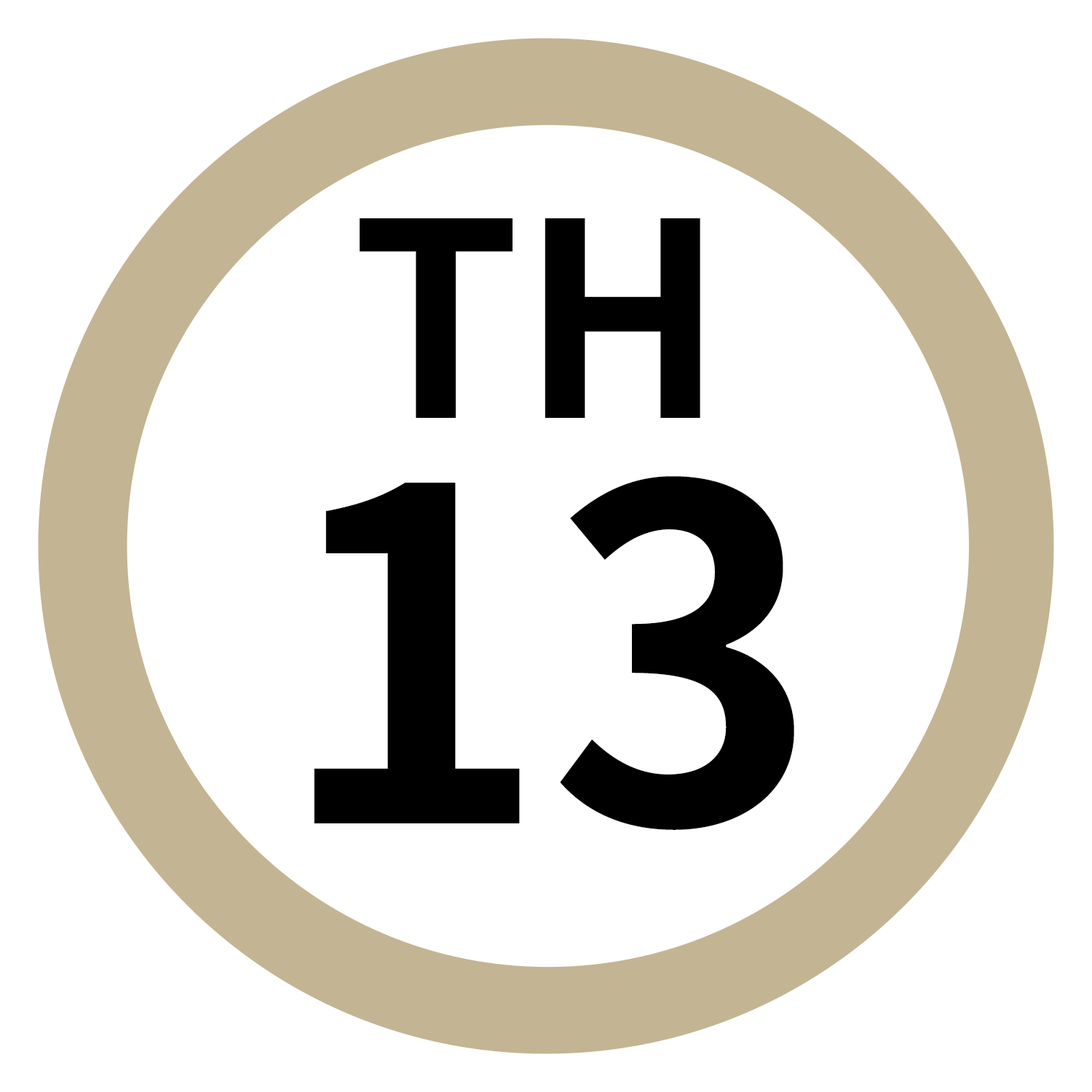
<style>
.page{position:relative;width:1092px;height:1092px;background:#ffffff}
.page>*{position:absolute;margin:0}
.t1{font:269.8px "NotoSansJP-Bold";color:#000000}
.t2{font:460.5px "NotoSansJP-Bold";color:#000000}
</style>
<div class="page">
<p class="t1" style="left:360px;top:218px;width:340px;height:200px">TH</p>
<p class="t2" style="left:314px;top:476px;width:480px;height:354px">13</p>
</div>
